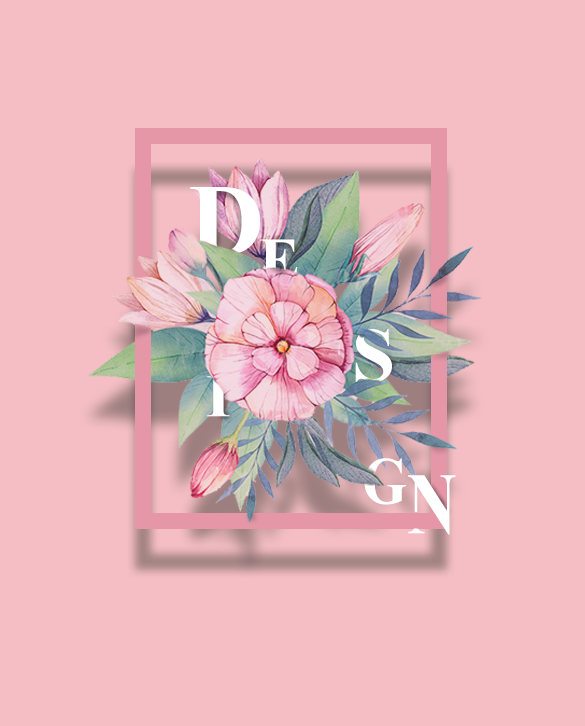
<style>
.page{position:relative;width:585px;height:726px;background:#f4bec4}
.page>*{position:absolute;margin:0}
.t1{font:102.7px "TimesNewRomanPS-BoldMT";color:#ffffff}
.t2{font:61.3px "TimesNewRomanPS-BoldMT";color:#ffffff}
.t3{font:76.8px "TimesNewRomanPS-BoldMT";color:#ffffff}
.t4{font:60.4px "TimesNewRomanPS-BoldMT";color:#ffffff;scale:1.06 1}
.t5{font:66.8px "TimesNewRomanPS-BoldMT";color:#ffffff;scale:0.86 1}
.t6{font:87.3px "TimesNewRomanPS-BoldMT";color:#ffffff;scale:0.8 1}
</style>
<div class="page">
<p class="t1" style="left:190px;top:187px;width:70px;height:69px">D</p>
<p class="t2" style="left:260px;top:239px;width:38px;height:41px">E</p>
<p class="t3" style="left:355px;top:329px;width:37px;height:53px">S</p>
<p class="t4" style="left:207px;top:376px;width:23px;height:41px">I</p>
<p class="t5" style="left:364px;top:458px;width:42px;height:47px">G</p>
<p class="t6" style="left:408px;top:475px;width:48px;height:60px">N</p>
</div>
